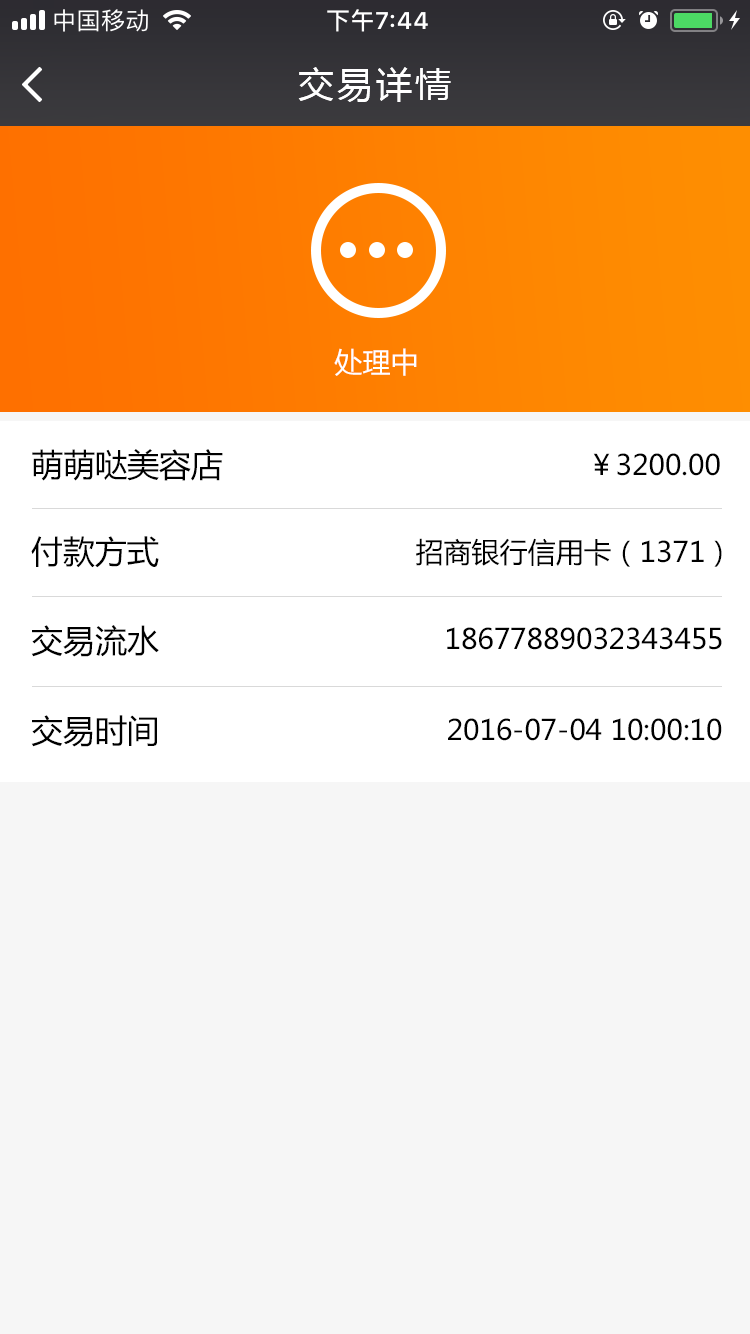
<style>
.page{position:relative;width:750px;height:1334px;background:#f6f6f6}
.page>*{position:absolute;margin:0}
.t1{font:36px "MicrosoftYaHei";letter-spacing:0.08em;color:#ffffff}
.t2{font:28px "MicrosoftYaHei";color:#ffffff}
.t3{font:32px "MicrosoftYaHei";color:#000000}
.t4{font:28px "MicrosoftYaHei";color:#000000}
</style>
<div class="page">
<p class="t1" style="left:298px;top:67px;width:153px;height:35px">交易详情</p>
<p class="t2" style="left:334px;top:348px;width:83px;height:28px">处理中</p>
<p class="t3" style="left:32px;top:449px;width:191px;height:32px">萌萌哒美容店</p>
<p class="t4" style="left:593px;top:453px;width:127px;height:23px">￥3200.00</p>
<p class="t3" style="left:31px;top:536px;width:128px;height:32px">付款方式</p>
<p class="t4" style="left:416px;top:538px;width:306px;height:29px">招商银行信用卡（1371）</p>
<p class="t3" style="left:31px;top:625px;width:128px;height:32px">交易流水</p>
<p class="t4" style="left:447px;top:627px;width:275px;height:23px">18677889032343455</p>
<p class="t3" style="left:31px;top:715px;width:126px;height:32px">交易时间</p>
<p class="t4" style="left:448px;top:718px;width:274px;height:23px">2016-07-04 10:00:10</p>
</div>
